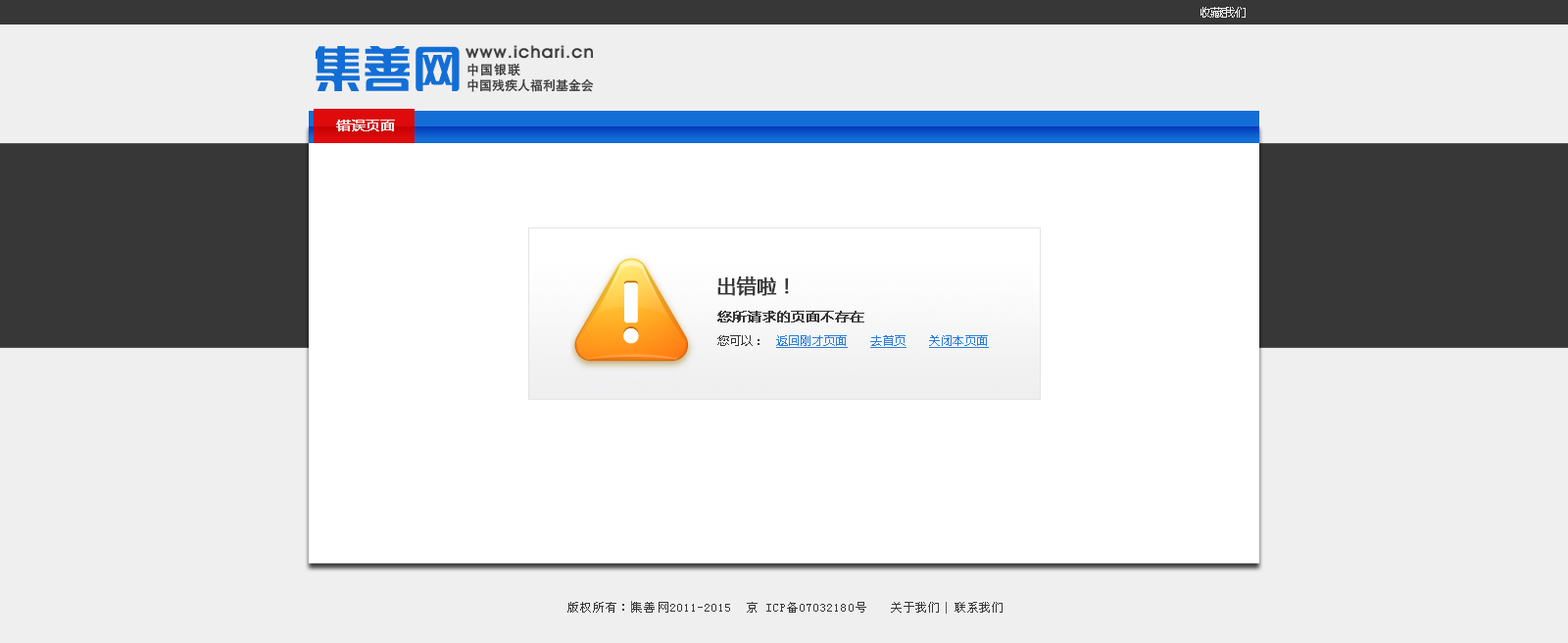
<style>
.page{position:relative;width:1568px;height:643px;background:#f0efef}
.page>*{position:absolute;margin:0}
.t1{font:11.8px "MicrosoftYaHei";color:#f0efef}
.t2{font:12.7px "HeitiCSEG-Medium-GB";letter-spacing:0.08em;color:#373738}
.t3{font:12.7px "HeitiCSEG-Medium-GB";color:#373738}
.t4{font:13.7px "MicrosoftYaHei";color:#f0efef;font-weight:bold}
.t5{font:19.6px "MicrosoftYaHei";color:#373738;font-weight:bold}
.t6{font:11.8px/23.5px "MicrosoftYaHei";color:#2e7ed9;text-decoration:underline}
.t7{font:13.7px/23.5px "MicrosoftYaHei";color:#373738;font-weight:bold}
.t8{font:11.8px/23.5px "MicrosoftYaHei";color:#373738}
.t9{font:11.8px "SimSun";letter-spacing:0.09em;color:#373738}
.t10{font:11.8px "SimSun";letter-spacing:0.07em;color:#373738}
</style>
<div class="page">
<p class="t1" style="left:1200px;top:7px;width:46px;height:11px">收藏我们</p>
<p class="t2" style="left:467px;top:63px;width:53px;height:13px">中国银联</p>
<p class="t3" style="left:467px;top:78px;width:127px;height:14px">中国残疾人福利基金会</p>
<p class="t4" style="left:336px;top:120px;width:59px;height:11px">错误页面</p>
<p class="t5" style="left:717px;top:276px;width:72px;height:20px">出错啦！</p>
<p class="t6" style="left:717px;top:311px;width:272px;height:37px"><span class="t7">您所请求的页面不存在<br></span><span class="t8">您可以：   </span>返回刚才页面      去首页      关闭本页面</p>
<p class="t9" style="left:567px;top:602px;width:299px;height:10px">版权所有：集善网2011-2015  京 ICP备07032180号</p>
<p class="t10" style="left:891px;top:602px;width:112px;height:10px">关于我们  联系我们</p>
</div>
